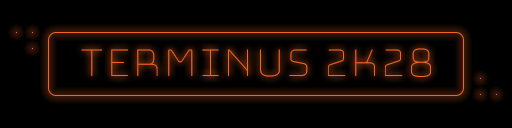
<style>
.page{position:relative;width:512px;height:128px;background:#000000}
.page>*{position:absolute;margin:0}
.t1{font:48px "BungeeHairline-Regular";letter-spacing:-0.1em;color:#f26522}
</style>
<div class="page">
<p class="t1" style="left:81px;top:48px;width:350px;height:29px">Terminus  2k28</p>
</div>
